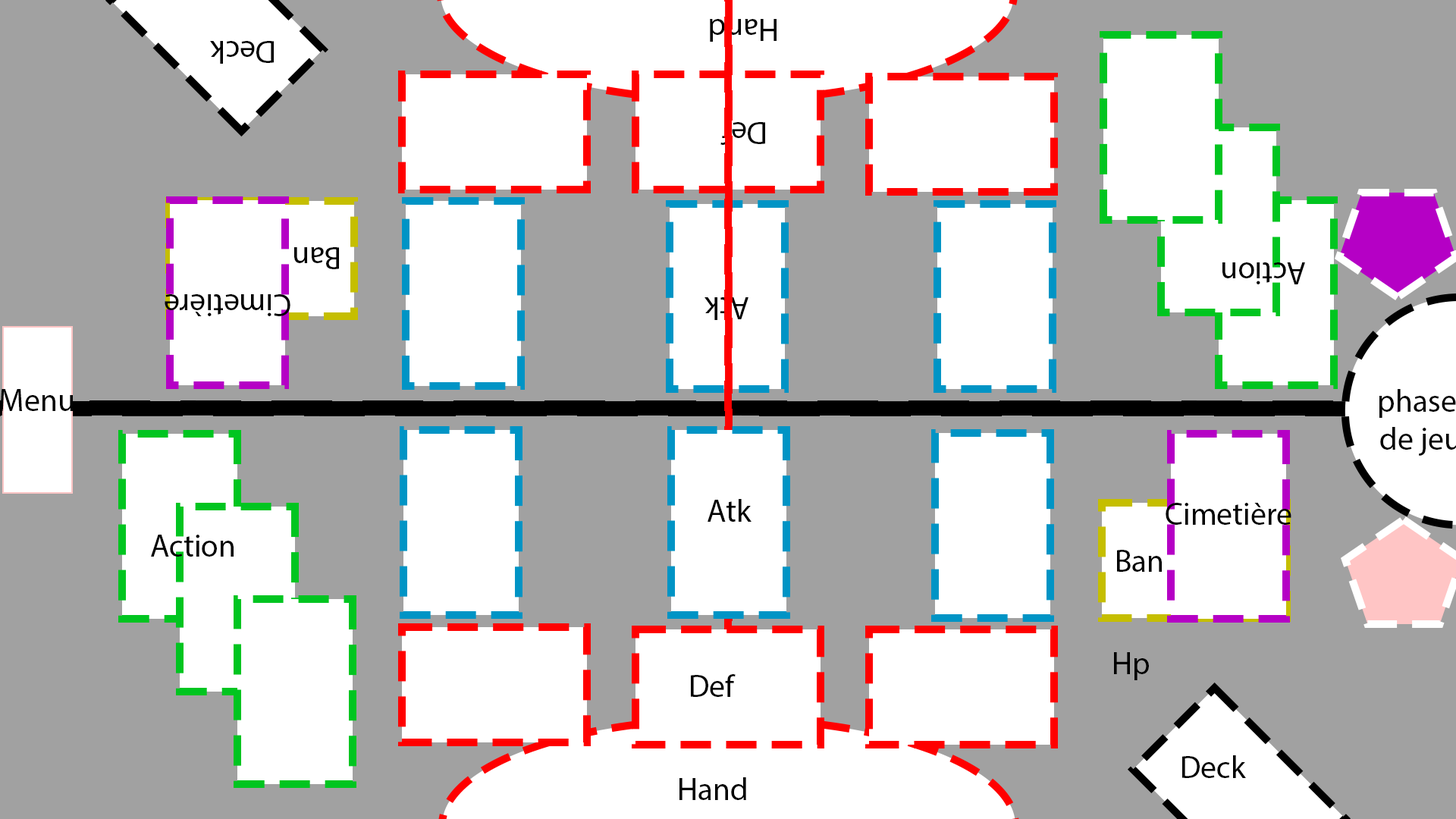
<style>
.page{position:relative;width:1456px;height:819px;background:#a1a1a1}
.page>*{position:absolute;margin:0}
.t1{font:31.6px "MyriadPro-Regular";color:#000000}
</style>
<div class="page">
<p class="t1" style="left:0px;top:389px;width:74px;height:22px">Menu</p>
<p class="t1" style="left:708px;top:499px;width:43px;height:23px">Atk</p>
<p class="t1" style="left:1166px;top:503px;width:125px;height:22px">Cimetière</p>
<p class="t1" style="left:151px;top:535px;width:83px;height:22px">Action</p>
<p class="t1" style="left:1117px;top:550px;width:45px;height:22px">Ban</p>
<p class="t1" style="left:1114px;top:652px;width:35px;height:28px">Hp</p>
<p class="t1" style="left:691px;top:674px;width:45px;height:23px">Def</p>
<p class="t1" style="left:1182px;top:755px;width:64px;height:23px">Deck</p>
<p class="t1" style="left:679px;top:777px;width:67px;height:23px">Hand</p>
</div>
